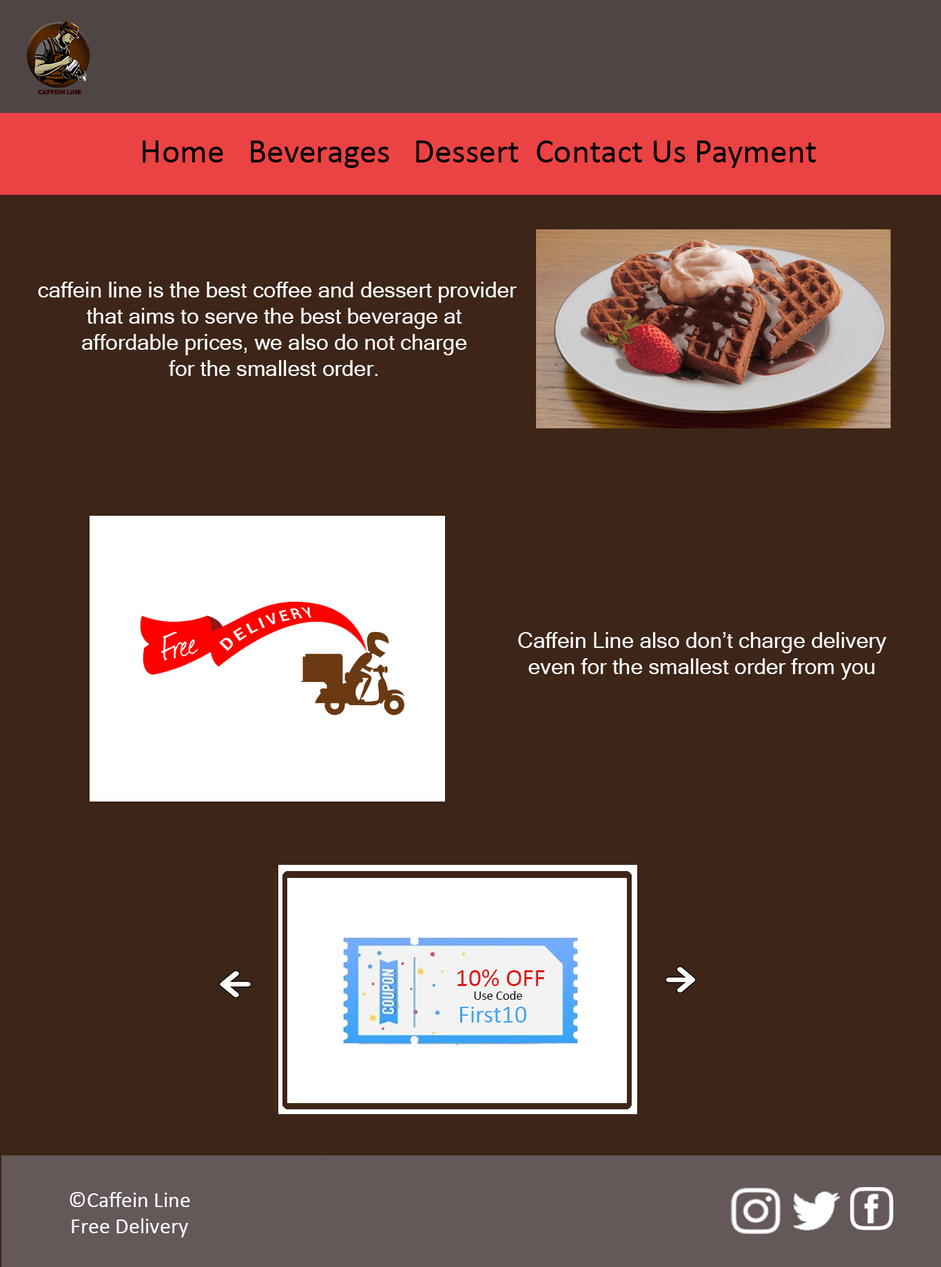
<style>
.page{position:relative;width:941px;height:1267px;background:#3d2517}
.page>*{position:absolute;margin:0}
.t1{font:34.4px "Calibri";color:#000000}
.t2{font:21.8px "MicrosoftSansSerif";color:#ffffff}
.t3{font:25.6px "Calibri";color:#dd1a1a}
.t4{font:12.8px "Calibri";color:#000000}
.t5{font:25px "Calibri";color:#3ca3f2}
.t6{font:22.1px "Calibri";color:#ffffff}
</style>
<div class="page">
<p class="t1" style="left:143px;top:141px;width:673px;height:27px">Home   Beverages   Dessert  Contact Us Payment</p>
<p class="t2" style="left:38px;top:282px;width:479px;height:94px;text-align:center">caffein line is the best coffee and dessert provider<br>that aims to serve the best beverage at <br>affordable prices, we also do not charge <br>for the smallest order.</p>
<p class="t2" style="left:518px;top:632px;width:368px;height:48px;text-align:center">Caffein Line also don’t charge delivery<br>even for the smallest order from you</p>
<p class="t3" style="left:457px;top:970px;width:88px;height:17px">10% OFF</p>
<p class="t4" style="left:474px;top:991px;width:48px;height:9px">Use Code</p>
<p class="t5" style="left:460px;top:1007px;width:66px;height:16px">First10</p>
<p class="t6" style="left:70px;top:1192px;width:120px;height:46px;text-align:center">©Caffein Line<br>Free Delivery</p>
</div>
